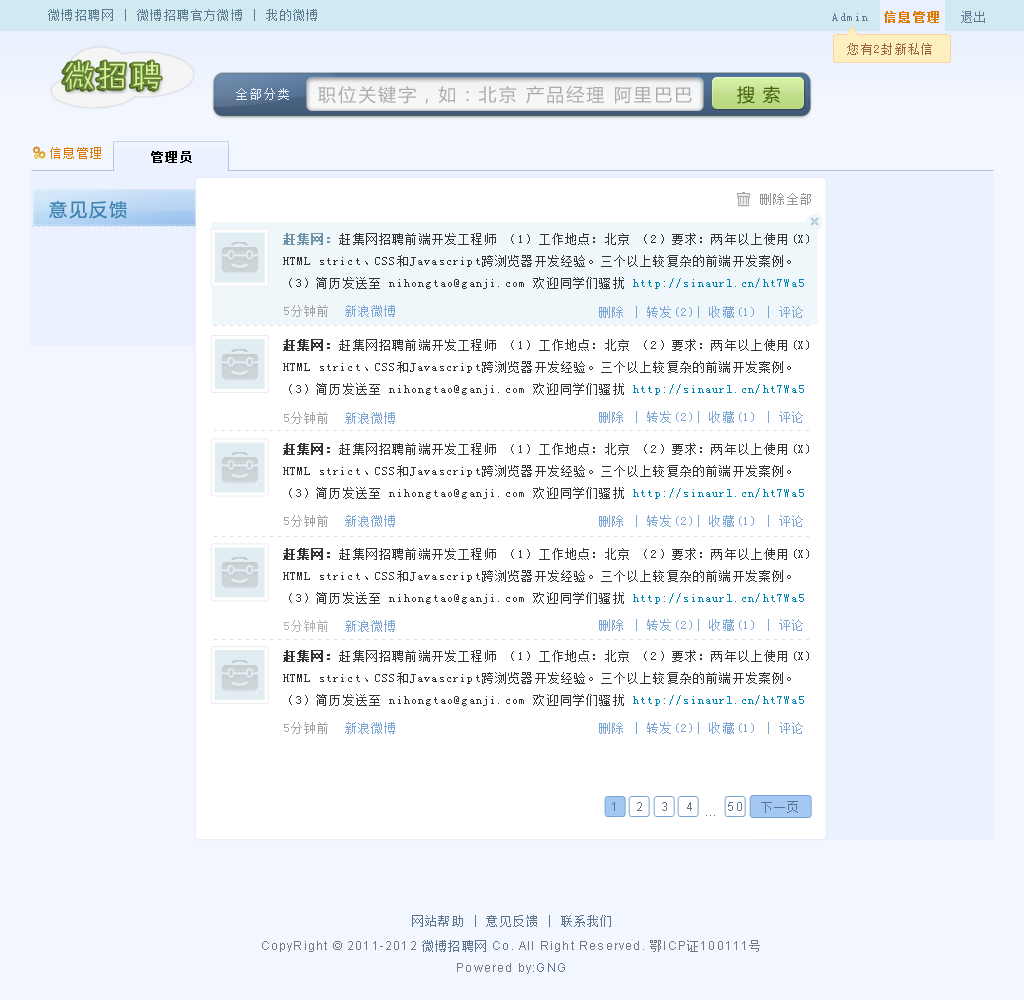
<style>
.page{position:relative;width:1024px;height:1000px;background:#f2f6fe}
.page>*{position:absolute;margin:0}
.t1{font:12px "SimSun";letter-spacing:0.115em;color:#5a7b92}
.t2{font:12px "SimSun";letter-spacing:0.115em;color:#df7902;font-weight:bold}
.t3{font:12px "SimSun";letter-spacing:0.115em;color:#9d6340}
.t4{font:30px "FZZHYJW--GB1-0";letter-spacing:0.115em;color:#d9ff97}
.t5{font:12px "SimSun";letter-spacing:0.175em;color:#ebf1fe}
.t6{font:18px "MicrosoftYaHei";letter-spacing:0.115em;color:#adadad}
.t7{font:18px "MicrosoftYaHei";letter-spacing:0.42em;color:#45630c;text-transform:uppercase}
.t8{font:12px "SimSun";letter-spacing:0.115em;color:#df7902}
.t9{font:12px "SimSun";letter-spacing:0.115em;color:#000000;font-weight:bold}
.t10{font:12px "SimSun";letter-spacing:0.115em;color:#949494}
.t11{font:18px "MicrosoftYaHei";letter-spacing:0.115em;color:#3e82af}
.t12{font:12px/22px "SimSun";letter-spacing:0.1em;color:#333333}
.t13{font:12px/22px "SimSun";letter-spacing:0.1em;color:#6f93ab;font-weight:bold}
.t14{font:12px/22px "SimSun";letter-spacing:0.1em;color:#0084b4}
.t15{font:12px "SimSun";letter-spacing:0.1em;color:#a2a2a2}
.t16{font:12px "SimSun";letter-spacing:0.1em;color:#7ba5d7}
.t17{font:12px/22px "SimSun";letter-spacing:0.1em;color:#333333;font-weight:bold}
.t18{font:12px "SimSun";letter-spacing:0.1em;color:#a3a3a3}
.t19{font:12px "ArialMT";letter-spacing:0.1em;color:#5c738f}
.t20{font:12px "SimSun";letter-spacing:0.1em;color:#5c738f}
.t21{font:12px/22px "ArialMT";letter-spacing:0.1em;color:#777777}
.t22{font:12px/22px "SimSun";letter-spacing:0.1em;color:#5c738f}
.t23{font:12px/22px "ArialMT";letter-spacing:0.1em;color:#5c738f}
.t24{font:12px/22px "SimSun";letter-spacing:0.1em;color:#777777}
</style>
<div class="page">
<p class="t1" style="left:48px;top:9px;width:269px;height:12px">微博招聘网 | 微博招聘官方微博 | 我的微博</p>
<p class="t1" style="left:832px;top:11px;width:107px;height:12px">Admin  <span class="t2">信息管理</span></p>
<p class="t1" style="left:961px;top:11px;width:24px;height:12px">退出</p>
<p class="t3" style="left:847px;top:43px;width:85px;height:12px">您有2封新私信</p>
<p class="t4" style="left:65px;top:61px;width:96px;height:28px">微招聘</p>
<p class="t5" style="left:236px;top:88px;width:53px;height:12px">全部分类</p>
<p class="t6" style="left:318px;top:85px;width:374px;height:19px">职位关键字，如：北京 产品经理 阿里巴巴</p>
<p class="t7" style="left:737px;top:86px;width:43px;height:18px">搜索</p>
<p class="t8" style="left:50px;top:147px;width:51px;height:12px">信息管理</p>
<p class="t9" style="left:151px;top:151px;width:41px;height:12px">管理员</p>
<p class="t10" style="left:760px;top:193px;width:51px;height:12px">删除全部</p>
<p class="t11" style="left:49px;top:200px;width:78px;height:19px">意见反馈</p>
<p class="t12" style="left:283px;top:233px;width:526px;height:56px"><span class="t13">赶集网：</span>赶集网招聘前端开发工程师 （1）工作地点：北京 （2）要求：两年以上使用(X) HTML strict、CSS和Javascript跨浏览器开发经验。三个以上较复杂的前端开发案例。 （3）简历发送至 nihongtao@ganji.com 欢迎同学们骚扰 <span class="t14">http://sinaurl.cn/ht7Wa5</span></p>
<p class="t15" style="left:284px;top:305px;width:111px;height:12px">5分钟前  <span class="t16">新浪微博</span></p>
<p class="t16" style="left:599px;top:306px;width:204px;height:12px">删除 | 转发(2)| 收藏(1) | 评论</p>
<p class="t12" style="left:283px;top:339px;width:526px;height:56px"><span class="t17">赶集网：</span>赶集网招聘前端开发工程师 （1）工作地点：北京 （2）要求：两年以上使用(X) HTML strict、CSS和Javascript跨浏览器开发经验。三个以上较复杂的前端开发案例。 （3）简历发送至 nihongtao@ganji.com 欢迎同学们骚扰 <span class="t14">http://sinaurl.cn/ht7Wa5</span></p>
<p class="t18" style="left:284px;top:412px;width:111px;height:12px">5分钟前  <span class="t16">新浪微博</span></p>
<p class="t16" style="left:599px;top:411px;width:204px;height:12px">删除 | 转发(2)| 收藏(1) | 评论</p>
<p class="t16" style="left:599px;top:515px;width:204px;height:12px">删除 | 转发(2)| 收藏(1) | 评论</p>
<p class="t16" style="left:599px;top:619px;width:204px;height:12px">删除 | 转发(2)| 收藏(1) | 评论</p>
<p class="t16" style="left:599px;top:722px;width:204px;height:12px">删除 | 转发(2)| 收藏(1) | 评论</p>
<p class="t19" style="left:612px;top:801px;width:186px;height:12px">1    2    3    4        50    <span class="t20">下一页</span></p>
<p class="t19" style="left:706px;top:815px;width:9px;height:1px">...</p>
<p class="t20" style="left:412px;top:915px;width:199px;height:12px">网站帮助 | 意见反馈 | 联系我们</p>
<p class="t21" style="left:262px;top:940px;width:498px;height:34px;text-align:center">CopyRight © 2011-2012 <span class="t22">微博招聘网</span><span class="t23"> Co. </span>All Right Reserved. <span class="t24">鄂</span>ICP<span class="t24">证</span>100111<span class="t24">号<br></span>Powered by<span class="t23">:GNG</span></p>
</div>
